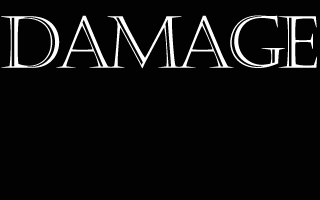
<style>
.page{position:relative;width:320px;height:200px;background:#020202}
.page>*{position:absolute;margin:0}
.t1{font:72px "Castellar";letter-spacing:-0.1em;color:#ffffff}
</style>
<div class="page">
<p class="t1" style="left:1px;top:15px;width:317px;height:54px">Damage</p>
</div>
